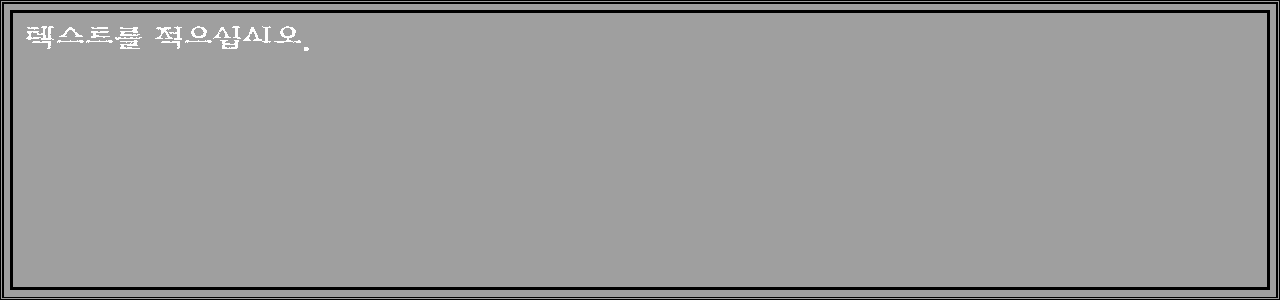
<style>
.page{position:relative;width:1280px;height:300px;background:#9f9f9f}
.page>*{position:absolute;margin:0}
.t1{font:30px "KoreanSK-R";color:#ffffff}
</style>
<div class="page">
<p class="t1" style="left:26px;top:26px;width:283px;height:25px">텍스트를 적으십시오.</p>
</div>
